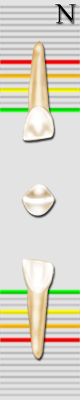
<style>
.page{position:relative;width:80px;height:400px;background:#e4e3e3}
.page>*{position:absolute;margin:0}
.t1{font:28.4px "TimesNewRomanPSMT";letter-spacing:0.005em;color:#000000}
</style>
<div class="page">
<p class="t1" style="left:55px;top:4px;width:21px;height:20px">N</p>
</div>
